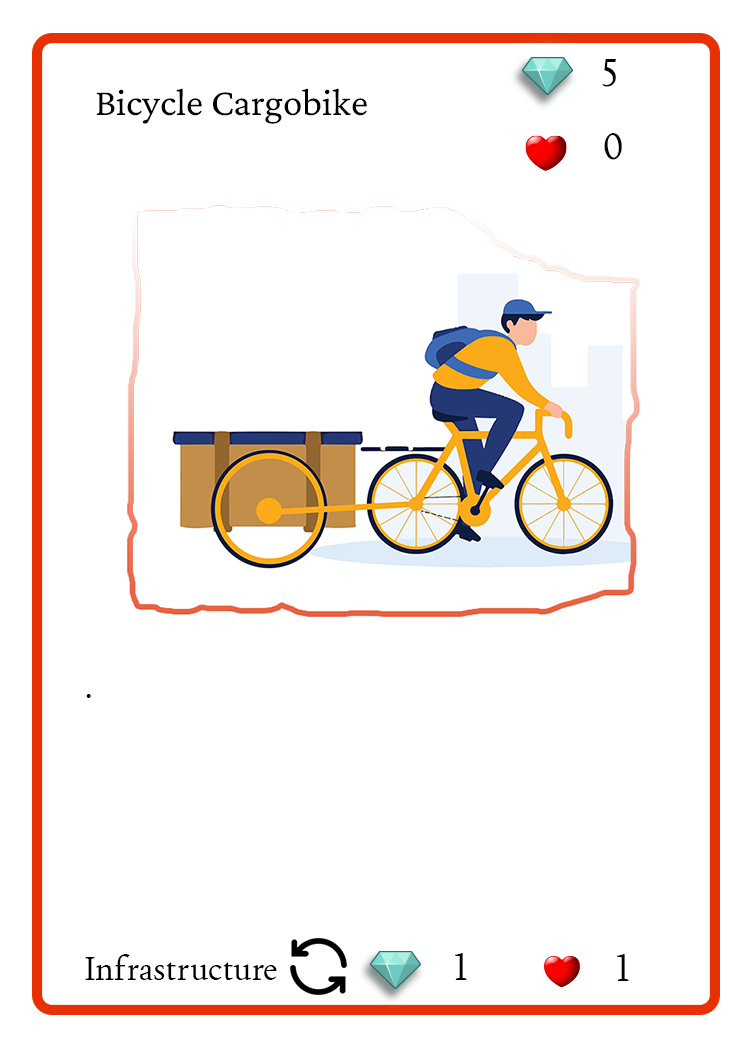
<style>
.page{position:relative;width:750px;height:1050px;background:#ffffff}
.page>*{position:absolute;margin:0}
.t1{font:37.5px "Joan-Regular";color:#000000;text-transform:uppercase}
.t2{font:38.9px "CrimsonPro-Regular";color:#000000}
.t3{font:33.3px "Joan-Regular";color:#000000}
</style>
<div class="page">
<p class="t1" style="left:602px;top:59px;width:14px;height:28px">5</p>
<p class="t2" style="left:96px;top:88px;width:271px;height:36px">Bicycle Cargobike</p>
<p class="t1" style="left:604px;top:133px;width:18px;height:27px">0</p>
<p class="t3" style="left:86px;top:694px;width:5px;height:4px">.</p>
<p class="t1" style="left:455px;top:953px;width:12px;height:27px">1</p>
<p class="t3" style="left:85px;top:954px;width:192px;height:26px">Infrastructure</p>
<p class="t1" style="left:617px;top:954px;width:12px;height:27px">1</p>
</div>
